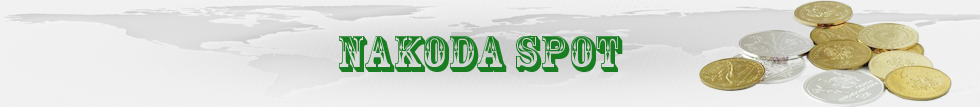
<style>
.page{position:relative;width:980px;height:107px}
.page>*{position:absolute;margin:0}
.t1{font:48px "RosewoodStd-Regular";color:#197d22}
</style>
<div class="page">
<p class="t1" style="left:339px;top:35px;width:284px;height:37px">NAKODA SPOT</p>
</div>
